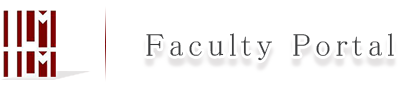
<style>
.page{position:relative;width:400px;height:87px;background:#ffffff}
.page>*{position:absolute;margin:0}
.t1{font:32px "MS-PMincho";letter-spacing:0.15em;color:#3c3d3f}
</style>
<div class="page">
<p class="t1" style="left:146px;top:33px;width:248px;height:28px">Faculty Portal</p>
</div>
